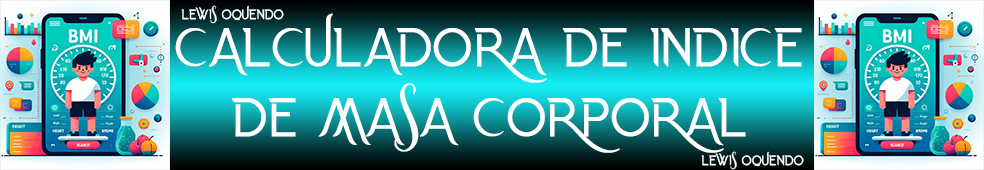
<style>
.page{position:relative;width:984px;height:170px}
.page>*{position:absolute;margin:0}
.t1{font:10px/70px "PersianSwordDemoRegular";letter-spacing:0.04em;color:#ffffff;text-transform:uppercase;font-weight:bold;scale:0.95 1}
.t2{font:40px/70px "PersianSwordDemoRegular";letter-spacing:0.04em;color:#ffffff;text-transform:uppercase;font-weight:bold;scale:0.95 1}
</style>
<div class="page">
<p class="t1" style="left:181px;top:5px;width:103px;height:19px;text-align:center">Lewis Oquendo</p>
<p class="t2" style="left:175px;top:13px;width:627px;height:140px;text-align:center">Calculadora de Indice<br>De Masa Corporal</p>
<p class="t1" style="left:701px;top:151px;width:103px;height:19px;text-align:center">Lewis Oquendo</p>
</div>
